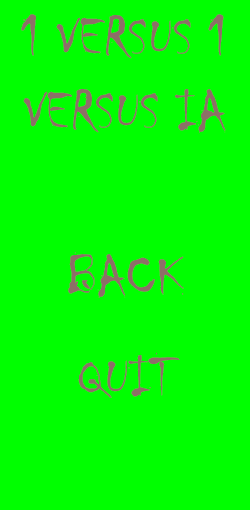
<style>
.page{position:relative;width:250px;height:510px;background:#00ff00}
.page>*{position:absolute;margin:0}
.t1{font:58.3px "Chiller-Regular";color:#8e6f67}
</style>
<div class="page">
<p class="t1" style="left:21px;top:14px;width:203px;height:45px">1 VERSUS 1</p>
<p class="t1" style="left:23px;top:89px;width:203px;height:44px">VERSUS IA</p>
<p class="t1" style="left:68px;top:252px;width:116px;height:46px">BACK</p>
<p class="t1" style="left:78px;top:352px;width:102px;height:46px">QUIT</p>
</div>
